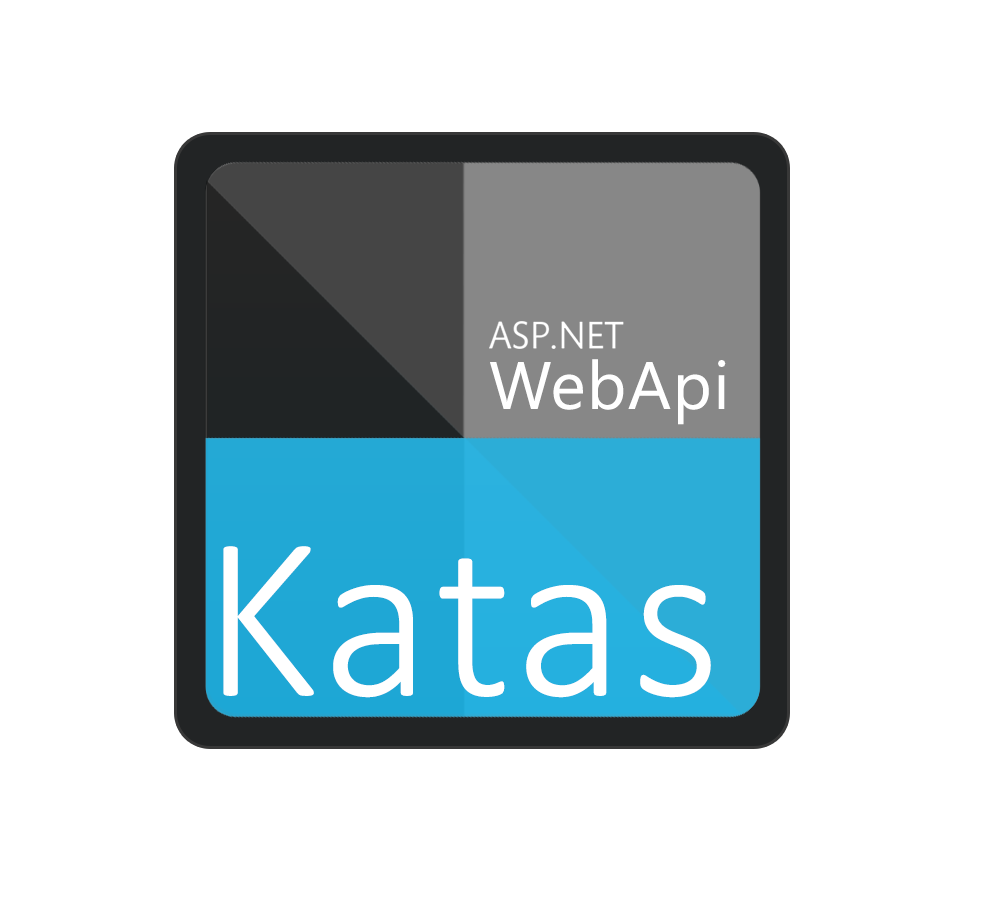
<style>
.page{position:relative;width:1000px;height:913px;background:#ffffff}
.page>*{position:absolute;margin:0}
.t1{font:66.7px "SegoeUI";letter-spacing:0.025em;color:#ffffff}
.t2{font:234.2px "Calibri-Light";letter-spacing:0.025em;color:#ffffff}
</style>
<div class="page">
<p class="t1" style="left:490px;top:359px;width:236px;height:66px">WebApi</p>
<p class="t2" style="left:223px;top:546px;width:488px;height:152px">Katas</p>
</div>
